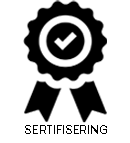
<style>
.page{position:relative;width:130px;height:143px;background:#ffffff}
.page>*{position:absolute;margin:0}
.t1{font:12px "OsloSans-Bold";color:#000000}
</style>
<div class="page">
<p class="t1" style="left:25px;top:125px;width:82px;height:9px">SERTIFISERING</p>
</div>
